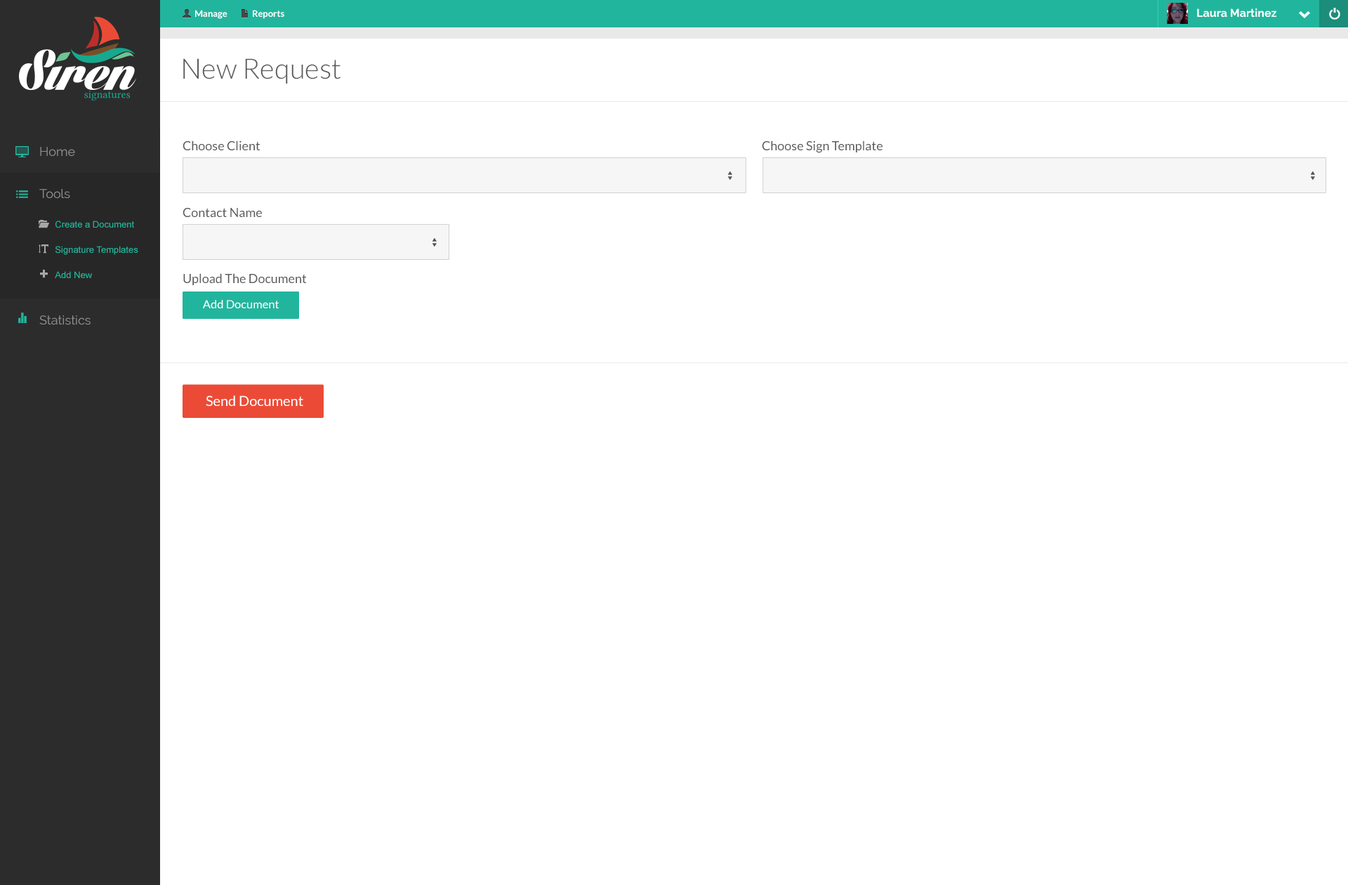
<style>
.page{position:relative;width:1348px;height:885px;background:#ffffff}
.page>*{position:absolute;margin:0}
.t1{font:9.1px "Lato-Bold";color:#ffffff}
.t2{font:11.2px "Raleway-Bold";color:#ffffff}
.t3{font:28.1px "Lato-Light";color:#5a5a5a}
.t4{font:12.6px/42.1px "Raleway";color:#919191}
.t5{font:12.6px "Lato-Regular";color:#5a5a5a}
.t6{font:9.1px/25.3px "ArialMT";color:#22b59d}
.t7{font:11.5px "Lato-Regular";color:#ffffff}
.t8{font:14px "Lato-Regular";color:#ffffff}
</style>
<div class="page">
<p class="t1" style="left:195px;top:10px;width:89px;height:9px">Manage              Reports</p>
<p class="t2" style="left:1197px;top:8px;width:79px;height:10px">Laura Martinez</p>
<p class="t3" style="left:183px;top:58px;width:158px;height:26px">New Request</p>
<p class="t4" style="left:39px;top:147px;width:52px;height:178px;text-align:justify">Home<br>Tools<br><br><br>Statistics</p>
<p class="t5" style="left:183px;top:140px;width:77px;height:10px">Choose Client</p>
<p class="t5" style="left:762px;top:140px;width:121px;height:13px">Choose Sign Template</p>
<p class="t5" style="left:183px;top:208px;width:79px;height:10px">Contact Name</p>
<p class="t6" style="left:55px;top:220px;width:83px;height:58px;text-align:justify">Create a Document<br>Signature Templates<br>Add New</p>
<p class="t5" style="left:183px;top:273px;width:124px;height:12px">Upload The Document</p>
<p class="t7" style="left:203px;top:300px;width:76px;height:8px">Add Document</p>
<p class="t8" style="left:206px;top:395px;width:97px;height:11px">Send Document</p>
</div>
